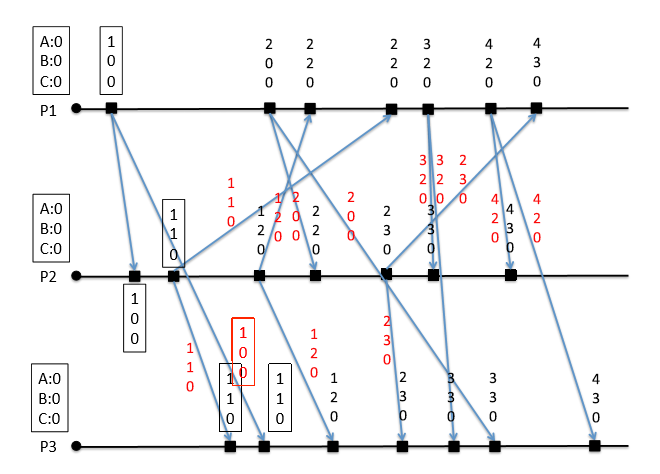
<style>
.page{position:relative;width:660px;height:474px;background:#ffffff}
.page>*{position:absolute;margin:0}
.t1{font:12px "Calibri";color:#050505}
.t2{font:12px "Calibri";color:#060606}
.t3{font:12px "Calibri";color:#040404}
.t4{font:12px "Calibri";color:#f90a0a}
.t5{font:12px "Calibri";color:#fc0a0a}
.t6{font:12px "Calibri";color:#fa0707}
.t7{font:12px "Calibri";color:#fd0303}
.t8{font:12px "Calibri";color:#fb0404}
.t9{font:12px "Calibri";color:#fd0404}
</style>
<div class="page">
<p class="t1" style="left:265px;top:38px;width:8px;height:50px">2<br>0<br>0</p>
<p class="t2" style="left:306px;top:38px;width:8px;height:50px">2<br>2<br>0</p>
<p class="t2" style="left:390px;top:38px;width:8px;height:50px">2<br>2<br>0</p>
<p class="t2" style="left:423px;top:38px;width:8px;height:50px">3<br>2<br>0</p>
<p class="t3" style="left:485px;top:38px;width:8px;height:50px">4<br>2<br>0</p>
<p class="t3" style="left:533px;top:37px;width:8px;height:50px">4<br>3<br>0</p>
<p class="t4" style="left:419px;top:154px;width:8px;height:50px">3<br>2<br>0</p>
<p class="t4" style="left:436px;top:154px;width:8px;height:50px">3<br>2<br>0</p>
<p class="t5" style="left:459px;top:154px;width:8px;height:50px">2<br>3<br>0</p>
<p class="t6" style="left:227px;top:177px;width:8px;height:50px">1<br>1<br>0</p>
<p class="t7" style="left:274px;top:192px;width:8px;height:50px">1<br>2<br>0</p>
<p class="t6" style="left:292px;top:191px;width:8px;height:50px">2<br>0<br>0</p>
<p class="t8" style="left:347px;top:191px;width:8px;height:50px">2<br>0<br>0</p>
<p class="t5" style="left:491px;top:193px;width:8px;height:50px">4<br>2<br>0</p>
<p class="t5" style="left:533px;top:193px;width:8px;height:50px">4<br>2<br>0</p>
<p class="t1" style="left:257px;top:205px;width:8px;height:50px">1<br>2<br>0</p>
<p class="t1" style="left:312px;top:205px;width:8px;height:50px">2<br>2<br>0</p>
<p class="t2" style="left:383px;top:205px;width:8px;height:50px">2<br>3<br>0</p>
<p class="t3" style="left:427px;top:204px;width:8px;height:50px">3<br>3<br>0</p>
<p class="t3" style="left:506px;top:203px;width:8px;height:50px">4<br>3<br>0</p>
<p class="t9" style="left:383px;top:315px;width:8px;height:50px">2<br>3<br>0</p>
<p class="t4" style="left:310px;top:328px;width:8px;height:50px">1<br>2<br>0</p>
<p class="t6" style="left:186px;top:342px;width:8px;height:50px">1<br>1<br>0</p>
<p class="t3" style="left:330px;top:372px;width:8px;height:50px">1<br>2<br>0</p>
<p class="t3" style="left:399px;top:371px;width:8px;height:50px">2<br>3<br>0</p>
<p class="t3" style="left:447px;top:372px;width:8px;height:50px">3<br>3<br>0</p>
<p class="t3" style="left:489px;top:372px;width:8px;height:50px">3<br>3<br>0</p>
<p class="t3" style="left:592px;top:373px;width:8px;height:50px">4<br>3<br>0</p>
</div>
